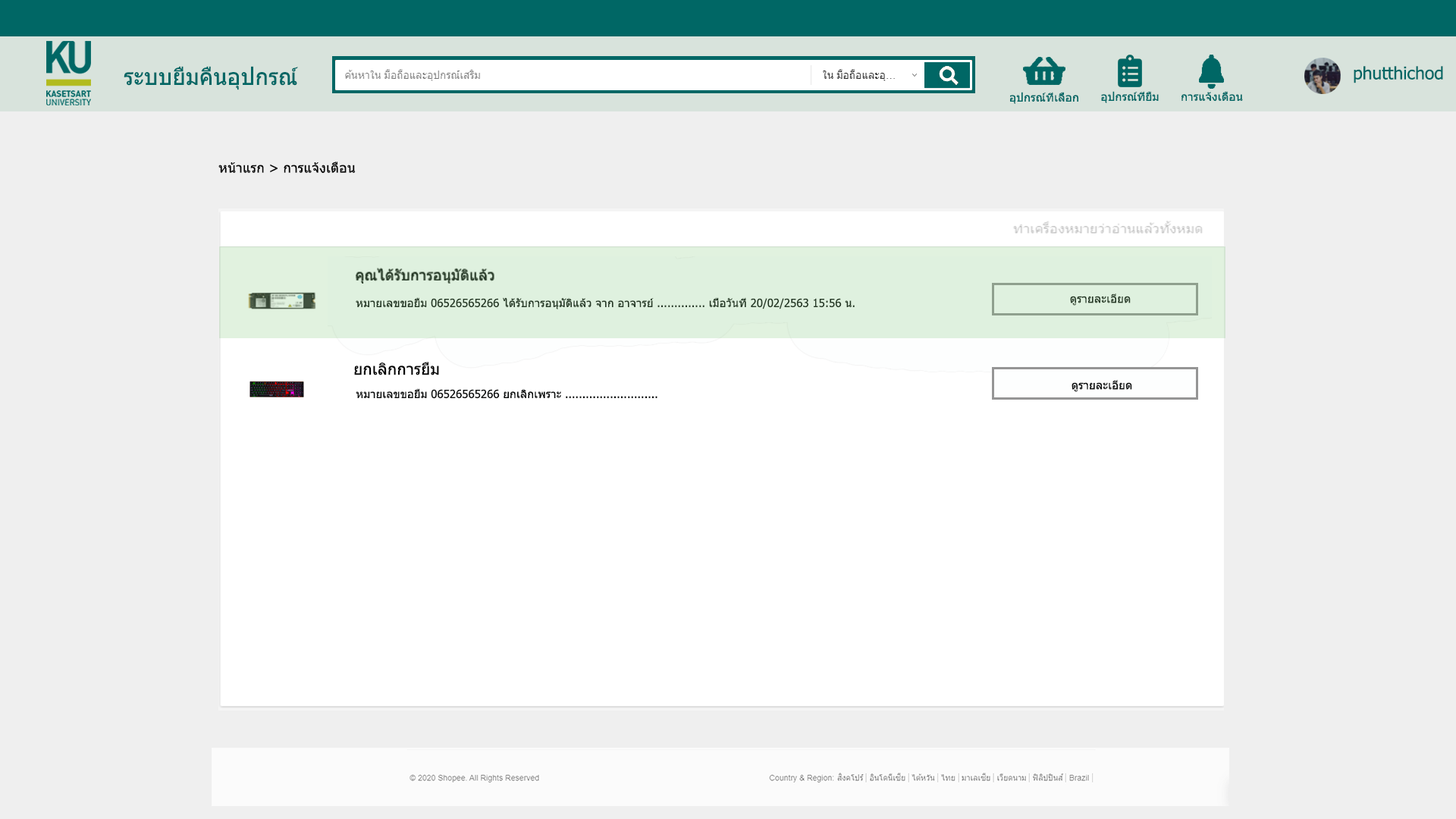
<style>
.page{position:relative;width:1456px;height:819px;background:#efefef}
.page>*{position:absolute;margin:0}
.t1{font:22.7px "Tahoma";color:#006765}
.t2{font:17.1px "Tahoma";color:#006765}
.t3{font:11.2px "Tahoma";color:#006765;scale:1.04 1}
.t4{font:13.6px "Tahoma";color:#030303}
.t5{font:11.5px "Tahoma";color:#243725}
.t6{font:11.2px "Tahoma";color:#243725}
.t7{font:16px "Tahoma";color:#000000}
.t8{font:11.2px "Tahoma";color:#0a0c0c}
.t9{font:11.5px "Tahoma";color:#0a0c0c}
</style>
<div class="page">
<p class="t1" style="left:124px;top:66px;width:174px;height:24px">ระบบยืมคืนอุปกรณ์</p>
<p class="t2" style="left:1354px;top:66px;width:89px;height:17px">phutthichod</p>
<p class="t3" style="left:1010px;top:92px;width:68px;height:12px">อุปกรณ์ที่เลือก</p>
<p class="t3" style="left:1101px;top:91px;width:58px;height:12px">อุปกรณ์ที่ยืม</p>
<p class="t3" style="left:1181px;top:91px;width:62px;height:11px">การแจ้งเตือน</p>
<p class="t4" style="left:218px;top:162px;width:138px;height:12px">หน้าแรก &gt; การแจ้งเตือน</p>
<p class="t5" style="left:1070px;top:293px;width:61px;height:13px">ดูรายละเอียด</p>
<p class="t6" style="left:356px;top:297px;width:499px;height:12px">หมายเลขขอยืม 06526565266 ได้รับการอนุมัติแล้ว จาก อาจารย์ .............. เมื่อวันที่ 20/02/2563 15:56 น.</p>
<p class="t7" style="left:354px;top:362px;width:85px;height:13px">ยกเลิกการยืม</p>
<p class="t8" style="left:356px;top:388px;width:301px;height:11px">หมายเลขขอยืม 06526565266 ยกเลิกเพราะ ...........................</p>
<p class="t9" style="left:1072px;top:380px;width:60px;height:12px">ดูรายละเอียด</p>
</div>
